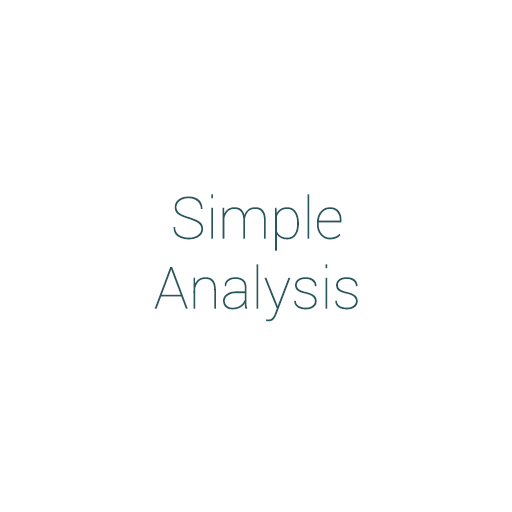
<style>
.page{position:relative;width:512px;height:512px;background:#ffffff}
.page>*{position:absolute;margin:0}
.t1{font:58.3px "Roboto-Thin";color:#28575e}
</style>
<div class="page">
<p class="t1" style="left:154px;top:194px;width:204px;height:128px;text-align:center">Simple<br>Analysis</p>
</div>
